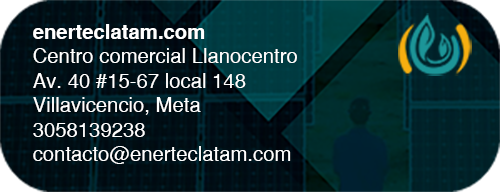
<style>
.page{position:relative;width:500px;height:192px}
.page>*{position:absolute;margin:0}
.t1{font:20.4px "SansSerif";color:#ffffff}
.t2{font:20.4px "SansSerifBold";color:#ffffff}
</style>
<div class="page">
<p class="t1" style="left:33px;top:24px;width:264px;height:140px"><span class="t2">enerteclatam.com<br></span>Centro comercial Llanocentro<br>Av. 40 #15-67 local 148<br>Villavicencio, Meta<br>3058139238<br>contacto@enerteclatam.com</p>
</div>
